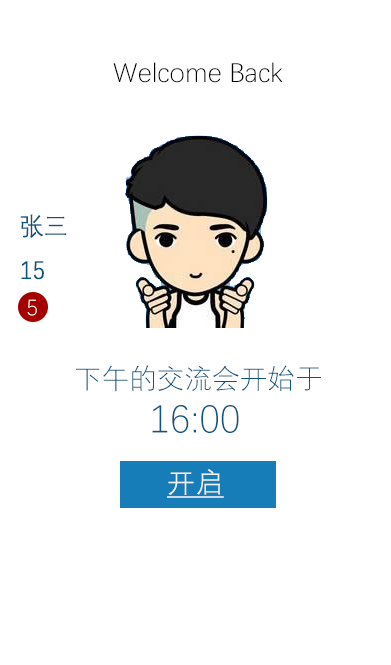
<style>
.page{position:relative;width:391px;height:665px;background:#ffffff}
.page>*{position:absolute;margin:0}
.t1{font:27.6px "DengXian-Light";color:#000000}
.t2{font:25px "DengXian-Light";color:#0c557f;font-weight:bold;scale:0.92 1}
.t3{font:22.6px "DengXian-Light";color:#ffffff}
.t4{font:27.6px "DengXian-Light";color:#0f567f}
.t5{font:39.6px "DengXian-Light";color:#0f567f}
.t6{font:27.6px "DengXian-Light";color:#f2f2f2;font-weight:bold;text-decoration:underline}
</style>
<div class="page">
<p class="t1" style="left:113px;top:62px;width:170px;height:21px">Welcome Back</p>
<p class="t2" style="left:20px;top:214px;width:47px;height:66px">张三<br>15</p>
<p class="t3" style="left:27px;top:299px;width:10px;height:17px">5</p>
<p class="t4" style="left:76px;top:365px;width:245px;height:68px">下午的交流会开始于<br>          <span class="t5">16:00</span></p>
<p class="t6" style="left:167px;top:469px;width:57px;height:29px">开启</p>
</div>
